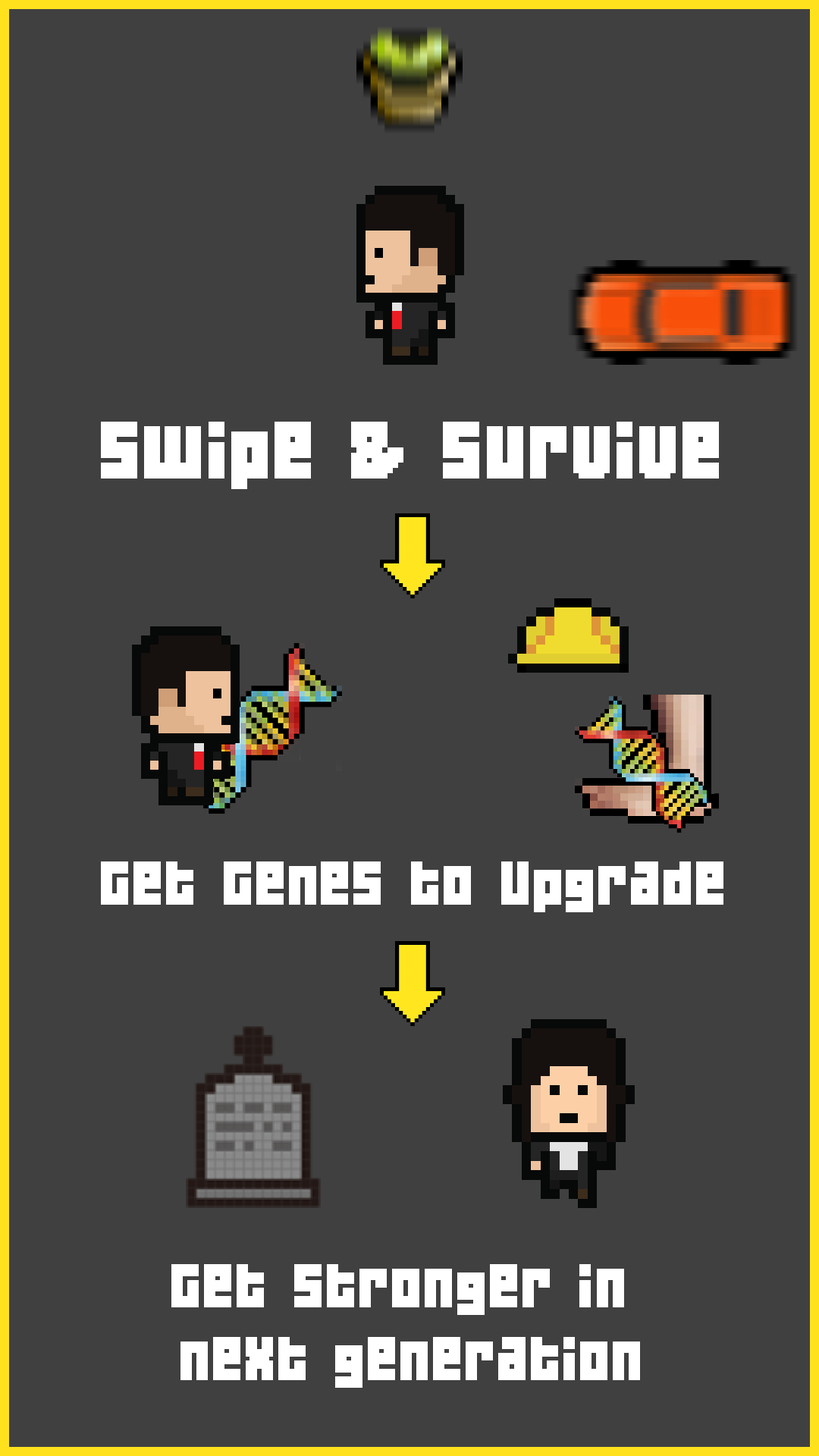
<style>
.page{position:relative;width:819px;height:1456px;background:#404040}
.page>*{position:absolute;margin:0}
.t1{font:72.8px "04b19";letter-spacing:0.025em;color:#ffffff}
.t2{font:54.6px "04b19";letter-spacing:0.025em;color:#ffffff}
.t3{font:54.6px/72.8px "04b19";letter-spacing:0.025em;color:#ffffff}
</style>
<div class="page">
<p class="t1" style="left:101px;top:422px;width:618px;height:67px">Swipe &amp; Survive</p>
<p class="t2" style="left:101px;top:861px;width:622px;height:51px">Get Genes to Upgrade</p>
<p class="t3" style="left:171px;top:1264px;width:469px;height:124px;text-align:center">Get stronger in <br>next generation</p>
</div>
